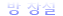
<style>
.page{position:relative;width:63px;height:16px;background:#ffffff}
.page>*{position:absolute;margin:0}
.t1{font:15px "MalgunGothicBold"}
</style>
<div class="page">
<p class="t1" style="left:7px;top:1px;width:48px;height:14px">방 창설</p>
</div>
